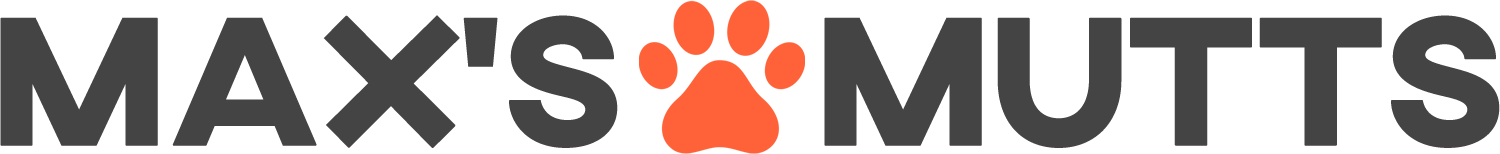
<style>
.page{position:relative;width:1500px;height:154px;background:#ffffff}
.page>*{position:absolute;margin:0}
.t1{font:186px "AXIS-ExtraBold";letter-spacing:-0.05em;color:#444444;font-weight:bold}
</style>
<div class="page">
<p class="t1" style="left:0px;top:15px;width:618px;height:133px">Max’s</p>
<p class="t1" style="left:824px;top:15px;width:676px;height:133px">mutts</p>
</div>
